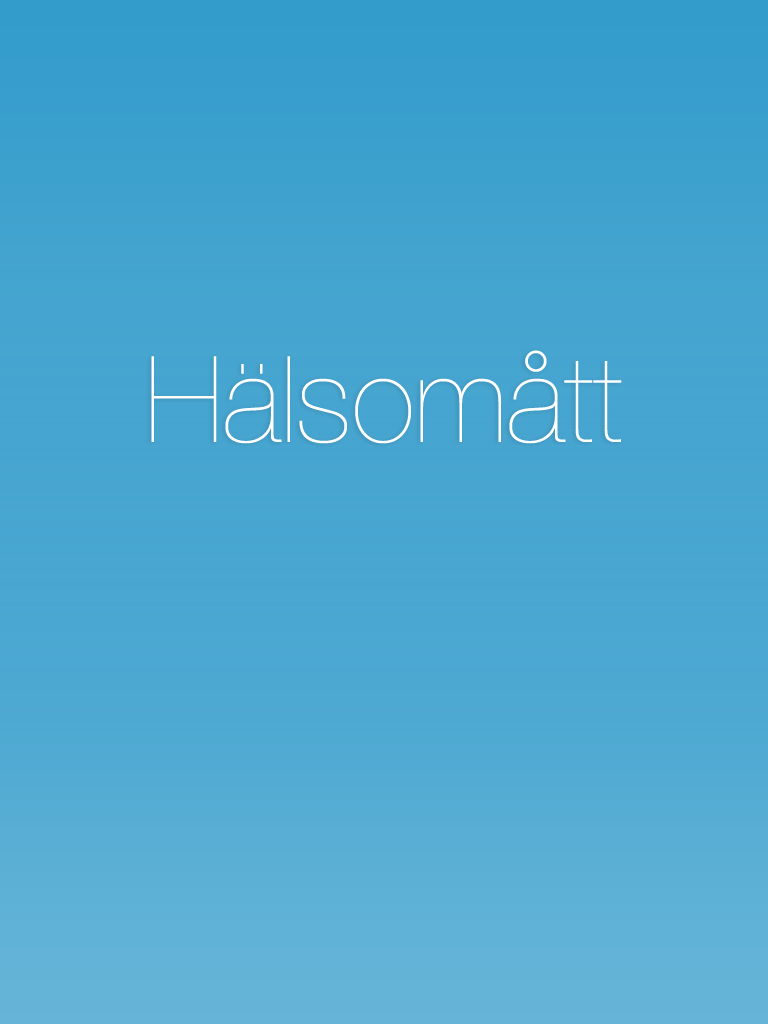
<style>
.page{position:relative;width:768px;height:1024px}
.page>*{position:absolute;margin:0}
.t1{font:120px "HelveticaNeue-UltraLight";color:#ffffff}
</style>
<div class="page">
<p class="t1" style="left:151px;top:350px;width:471px;height:94px">Hälsomått</p>
</div>
